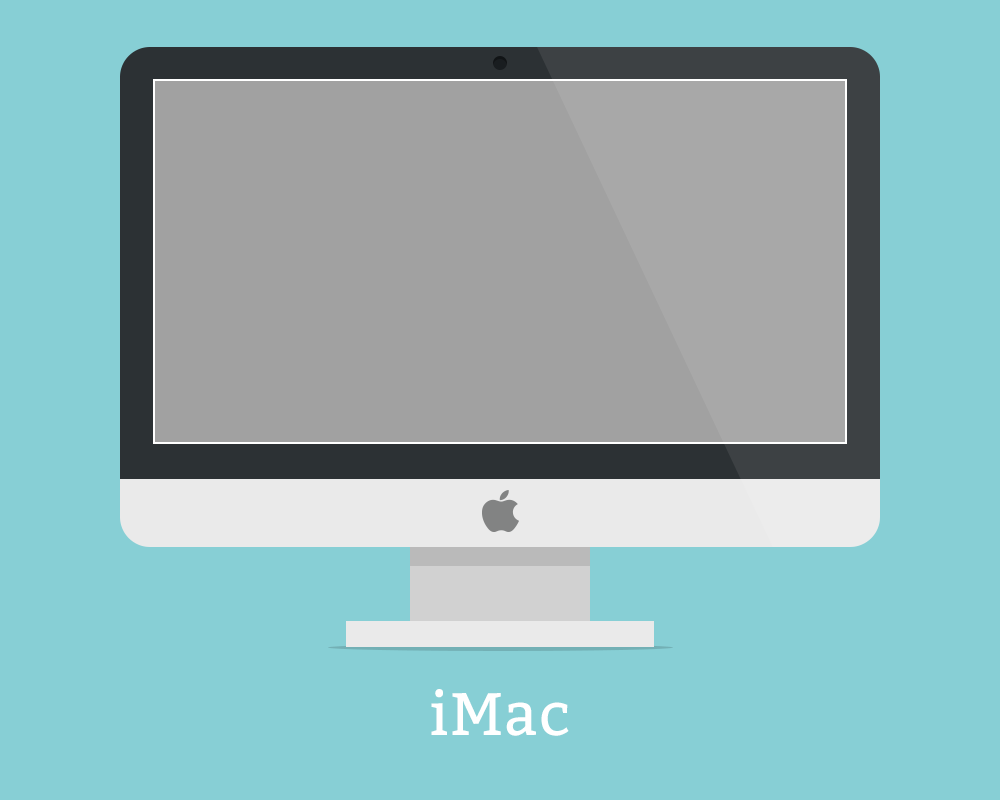
<style>
.page{position:relative;width:1000px;height:800px;background:#87cfd5}
.page>*{position:absolute;margin:0}
.t1{font:60px "Bitter-Regular";letter-spacing:0.02em;color:#ffffff}
</style>
<div class="page">
<p class="t1" style="left:431px;top:689px;width:138px;height:47px">iMac</p>
</div>
